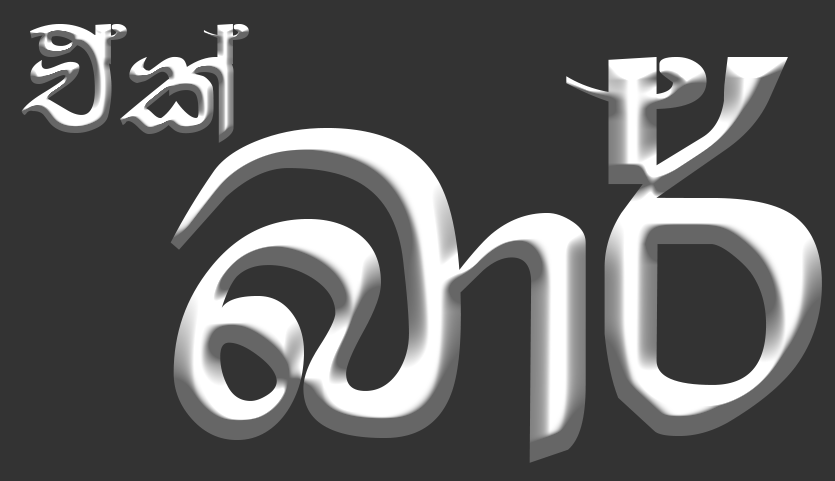
<style>
.page{position:relative;width:835px;height:481px;background:#333333}
.page>*{position:absolute;margin:0}
.t1{font:155.2px "SARA-BARON"}
.t2{font:484.2px "SARA-BARON"}
</style>
<div class="page">
<p class="t1" style="left:21px;top:24px;width:228px;height:119px">tAla</p>
<p class="t2" style="left:170px;top:57px;width:652px;height:406px">nd¾</p>
</div>
